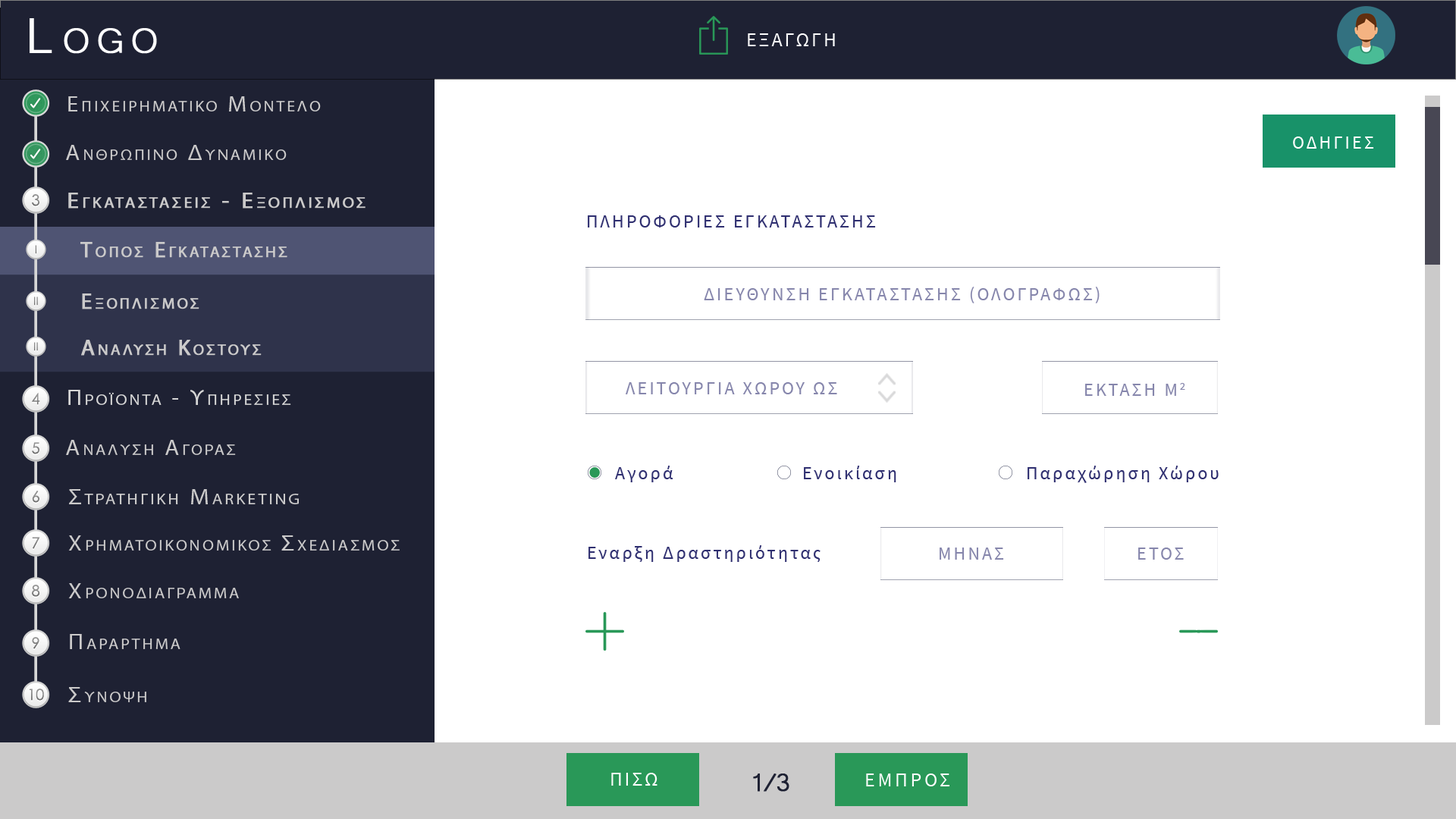
<style>
.page{position:relative;width:1456px;height:819px;background:#ffffff}
.page>*{position:absolute;margin:0}
.t1{font:63.7px "Microsoft-Yi-Baiti";letter-spacing:0.13em;color:#ffffff;font-variant:small-caps;font-weight:bold}
.t2{font:20px "SourceSansPro-Regular";letter-spacing:0.1em;color:#fefefe;text-transform:uppercase}
.t3{font:21.7px "MyriadPro-Regular";letter-spacing:0.13em;color:#cbcaca;font-variant:small-caps;scale:1.09 1}
.t4{font:23.4px "Microsoft-Yi-Baiti";letter-spacing:0.13em;color:#cbcaca;font-variant:small-caps;font-weight:bold}
.t5{font:18.2px "SourceSansPro-Regular";letter-spacing:0.13em;color:#ffffff;text-transform:uppercase}
.t6{font:15.3px "CenturyGothic";color:#8b8b8b}
.t7{font:21.7px/91px "MyriadPro-Regular";letter-spacing:0.13em;color:#cbcaca;font-variant:small-caps;font-weight:bold;scale:1.09 1}
.t8{font:23.4px/91px "Microsoft-Yi-Baiti";letter-spacing:0.13em;color:#cbcaca;font-variant:small-caps;font-weight:bold}
.t9{font:18.2px "SourceSansPro-Regular";letter-spacing:0.13em;color:#2f2f70;text-transform:uppercase}
.t10{font:11.2px "CenturyGothic";color:#808080}
.t11{font:22.3px "MyriadPro-Regular";letter-spacing:0.13em;color:#cbcaca;font-variant:small-caps;font-weight:bold}
.t12{font:18.2px "SourceSansPro-Regular";letter-spacing:0.13em;color:#8686ac;text-transform:uppercase}
.t13{font:11.2px "CenturyGothic";color:#828282}
.t14{font:21.7px "MyriadPro-Regular";letter-spacing:0.13em;color:#d6d6d6;font-variant:small-caps;scale:1.09 1}
.t15{font:23.4px "Microsoft-Yi-Baiti";letter-spacing:0.13em;color:#d6d6d6;font-variant:small-caps;font-weight:bold}
.t16{font:15.3px "CenturyGothic";color:#878787}
.t17{font:15.3px "CenturyGothic";color:#898989}
.t18{font:18.2px "SourceSansPro-Regular";letter-spacing:0.13em;color:#2f2f70}
.t19{font:15.3px "CenturyGothic";color:#838383}
.t20{font:22.2px "MyriadPro-Regular";letter-spacing:0.13em;color:#cbcaca;font-variant:small-caps;scale:1.09 1}
.t21{font:25.5px "Microsoft-Yi-Baiti";letter-spacing:0.13em;color:#cbcaca;font-variant:small-caps;font-weight:bold}
.t22{font:15.3px "CenturyGothic";color:#888888}
.t23{font:23.7px "Microsoft-Yi-Baiti";letter-spacing:0.13em;color:#cbcaca;font-variant:small-caps;scale:1.09 1}
.t24{font:32.8px "Microsoft-Yi-Baiti";letter-spacing:-0.1em;color:#1e2133;font-weight:bold}
.t25{font:20px "SourceSansPro-Regular";letter-spacing:0.13em;color:#fefefe;text-transform:uppercase}
</style>
<div class="page">
<p class="t1" style="left:30px;top:18px;width:127px;height:36px">Logo</p>
<p class="t2" style="left:748px;top:33px;width:87px;height:13px">εξαγωγη</p>
<p class="t3" style="left:68px;top:96px;width:253px;height:15px"><span class="t4">   </span>Επιχειρηματικο Μοντελο</p>
<p class="t5" style="left:1293px;top:136px;width:81px;height:13px">Οδηγιεσ</p>
<p class="t3" style="left:66px;top:145px;width:221px;height:15px"><span class="t4">   </span>Ανθρωπινο Δυναμικο</p>
<p class="t6" style="left:32px;top:194px;width:7px;height:12px">3</p>
<p class="t7" style="left:68px;top:193px;width:298px;height:16px"><span class="t8">   </span>Εγκαταστασεισ - Εξοπλισμοσ<br><br><span class="t8">Equipment</span></p>
<p class="t9" style="left:588px;top:215px;width:288px;height:12px">ΠΛΗΡΟΦΟΡΙΕΣ ΕΓΚΑΤΑΣΤΑΣΗΣ</p>
<p class="t10" style="left:35px;top:245px;width:1px;height:9px">I</p>
<p class="t11" style="left:80px;top:242px;width:207px;height:16px">Τοποσ Εγκαταστασησ</p>
<p class="t11" style="left:82px;top:293px;width:117px;height:16px">Εξοπλισμοσ</p>
<p class="t12" style="left:704px;top:287px;width:396px;height:16px">ΔιΕυθυνση εγκαταστασησ (ΟΛΟγραφωσ)</p>
<p class="t13" style="left:34px;top:297px;width:4px;height:9px">II</p>
<p class="t11" style="left:81px;top:340px;width:181px;height:16px">Αναλυση Κοστουσ</p>
<p class="t13" style="left:34px;top:342px;width:4px;height:9px">II</p>
<p class="t14" style="left:68px;top:390px;width:223px;height:15px"><span class="t15">   </span>Προϊοντα - Υπηρεσιεσ</p>
<p class="t12" style="left:626px;top:382px;width:211px;height:12px">ΛΕΙΤΟΥΡΓΙΑ ΧΩΡΟΥ ΩΣ</p>
<p class="t12" style="left:1085px;top:383px;width:100px;height:13px">εκταση Μ2</p>
<p class="t16" style="left:32px;top:393px;width:8px;height:12px">4</p>
<p class="t17" style="left:32px;top:442px;width:7px;height:12px">5</p>
<p class="t3" style="left:66px;top:440px;width:170px;height:15px"><span class="t4">   </span>Αναλυση Αγορασ</p>
<p class="t18" style="left:615px;top:466px;width:58px;height:16px">Αγορά</p>
<p class="t18" style="left:804px;top:466px;width:92px;height:16px">Ενοικίαση</p>
<p class="t18" style="left:1028px;top:466px;width:191px;height:17px">Παραχώρηση Χώρου</p>
<p class="t19" style="left:32px;top:491px;width:7px;height:12px">6</p>
<p class="t20" style="left:69px;top:489px;width:230px;height:15px"><span class="t21">   </span>Στρατηγικη Marketing</p>
<p class="t22" style="left:32px;top:537px;width:8px;height:12px">7</p>
<p class="t3" style="left:68px;top:535px;width:332px;height:16px"><span class="t21">   </span>Χρηματοικονομικοσ Σχεδιασμοσ</p>
<p class="t18" style="left:588px;top:545px;width:233px;height:17px">Εναρξη Δραστηριότητας</p>
<p class="t12" style="left:940px;top:548px;width:64px;height:12px">μηνασ</p>
<p class="t12" style="left:1138px;top:548px;width:46px;height:12px">ετοσ</p>
<p class="t6" style="left:32px;top:585px;width:8px;height:12px">8</p>
<p class="t3" style="left:68px;top:583px;width:171px;height:15px"><span class="t21">   </span>Χρονοδιαγραμμα</p>
<p class="t19" style="left:32px;top:637px;width:7px;height:12px">9</p>
<p class="t3" style="left:70px;top:634px;width:110px;height:15px"><span class="t23">   </span>Παραρτημα</p>
<p class="t16" style="left:29px;top:689px;width:15px;height:12px">10</p>
<p class="t3" style="left:68px;top:687px;width:78px;height:15px"><span class="t23">   </span>Συνοψη</p>
<p class="t2" style="left:611px;top:773px;width:46px;height:13px">Πισω</p>
<p class="t24" style="left:753px;top:773px;width:36px;height:19px">1/3</p>
<p class="t25" style="left:866px;top:773px;width:83px;height:13px">εμπροσ</p>
</div>
